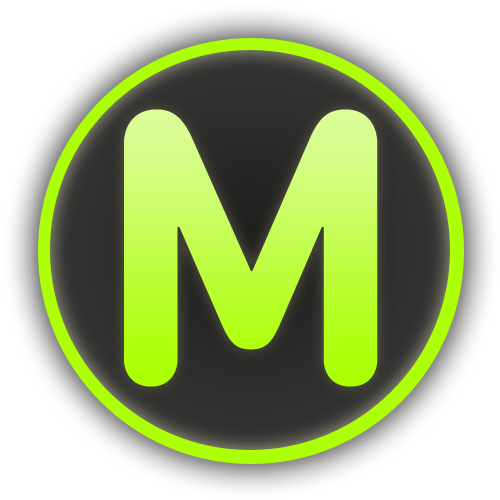
<style>
.page{position:relative;width:500px;height:500px;background:#ffffff}
.page>*{position:absolute;margin:0}
.t1{font:400px "DINNextRoundedLTPro-Bold";text-transform:uppercase}
</style>
<div class="page">
<p class="t1" style="left:124px;top:109px;width:254px;height:278px">M</p>
</div>
